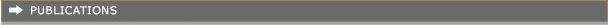
<style>
.page{position:relative;width:608px;height:25px;background:#6b6b6b}
.page>*{position:absolute;margin:0}
.t1{font:10.7px "Verdana";letter-spacing:0.025em;color:#fdfdfc;font-weight:bold}
</style>
<div class="page">
<p class="t1" style="left:31px;top:6px;width:86px;height:9px">PUBLICATIONS</p>
</div>
